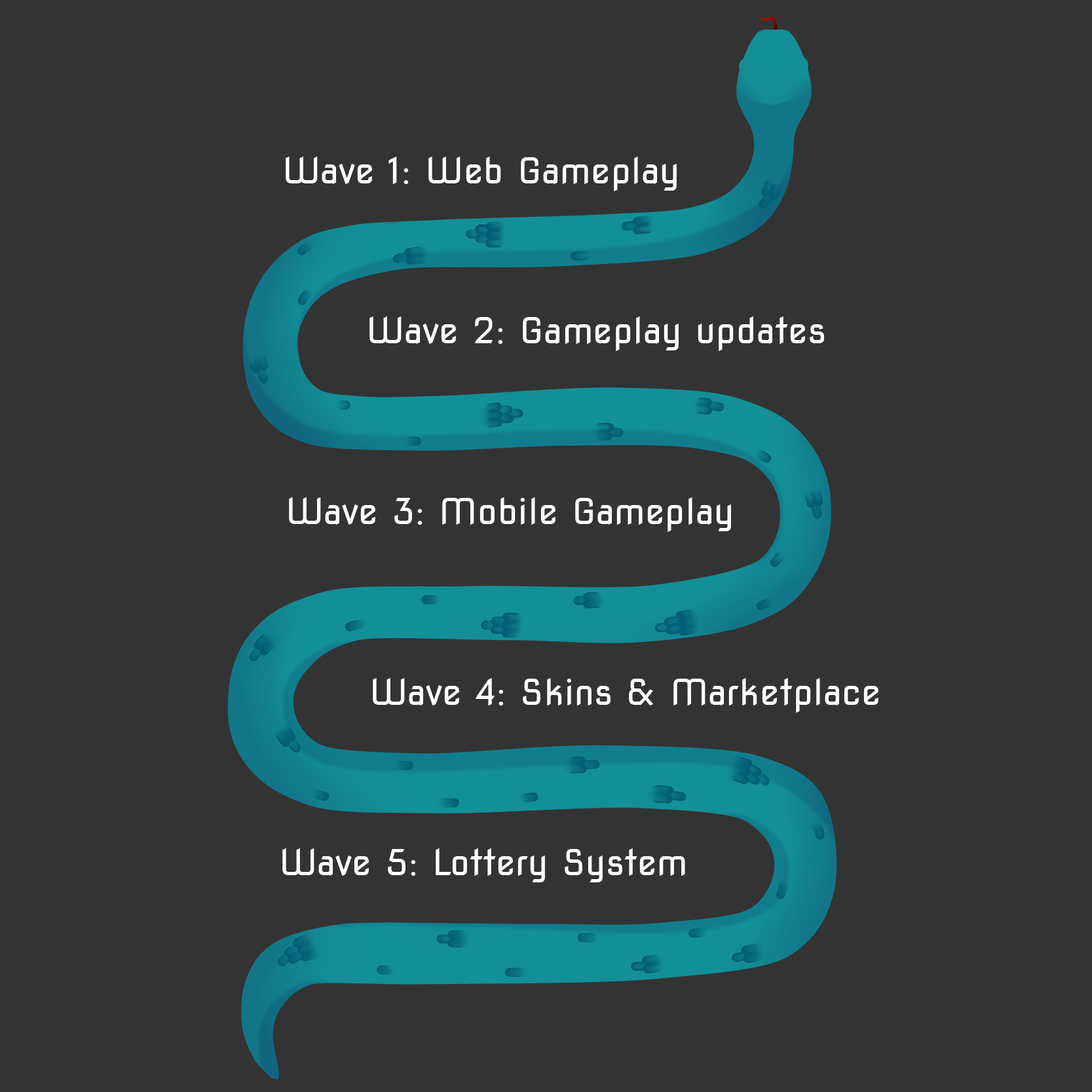
<style>
.page{position:relative;width:1092px;height:1092px;background:#333333}
.page>*{position:absolute;margin:0}
.t1{font:35.5px "NovaSquare";color:#ffffff}
</style>
<div class="page">
<p class="t1" style="left:286px;top:157px;width:391px;height:34px">Wave 1: Web Gameplay</p>
<p class="t1" style="left:369px;top:316px;width:455px;height:35px">Wave 2: Gameplay updates</p>
<p class="t1" style="left:289px;top:497px;width:442px;height:35px">Wave 3: Mobile Gameplay</p>
<p class="t1" style="left:373px;top:678px;width:505px;height:35px">Wave 4: Skins &amp; Marketplace</p>
<p class="t1" style="left:282px;top:848px;width:403px;height:34px">Wave 5: Lottery System</p>
</div>
